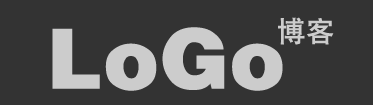
<style>
.page{position:relative;width:373px;height:105px;background:#333333}
.page>*{position:absolute;margin:0}
.t1{font:28px "HeitiCSEG-Medium-GB";color:#cccccc;font-weight:bold}
.t2{font:93.3px "Helvetica-Black-SemiBold";color:#cccccc}
</style>
<div class="page">
<p class="t1" style="left:278px;top:17px;width:56px;height:28px">博客</p>
<p class="t2" style="left:52px;top:27px;width:231px;height:64px">LoGo</p>
</div>
